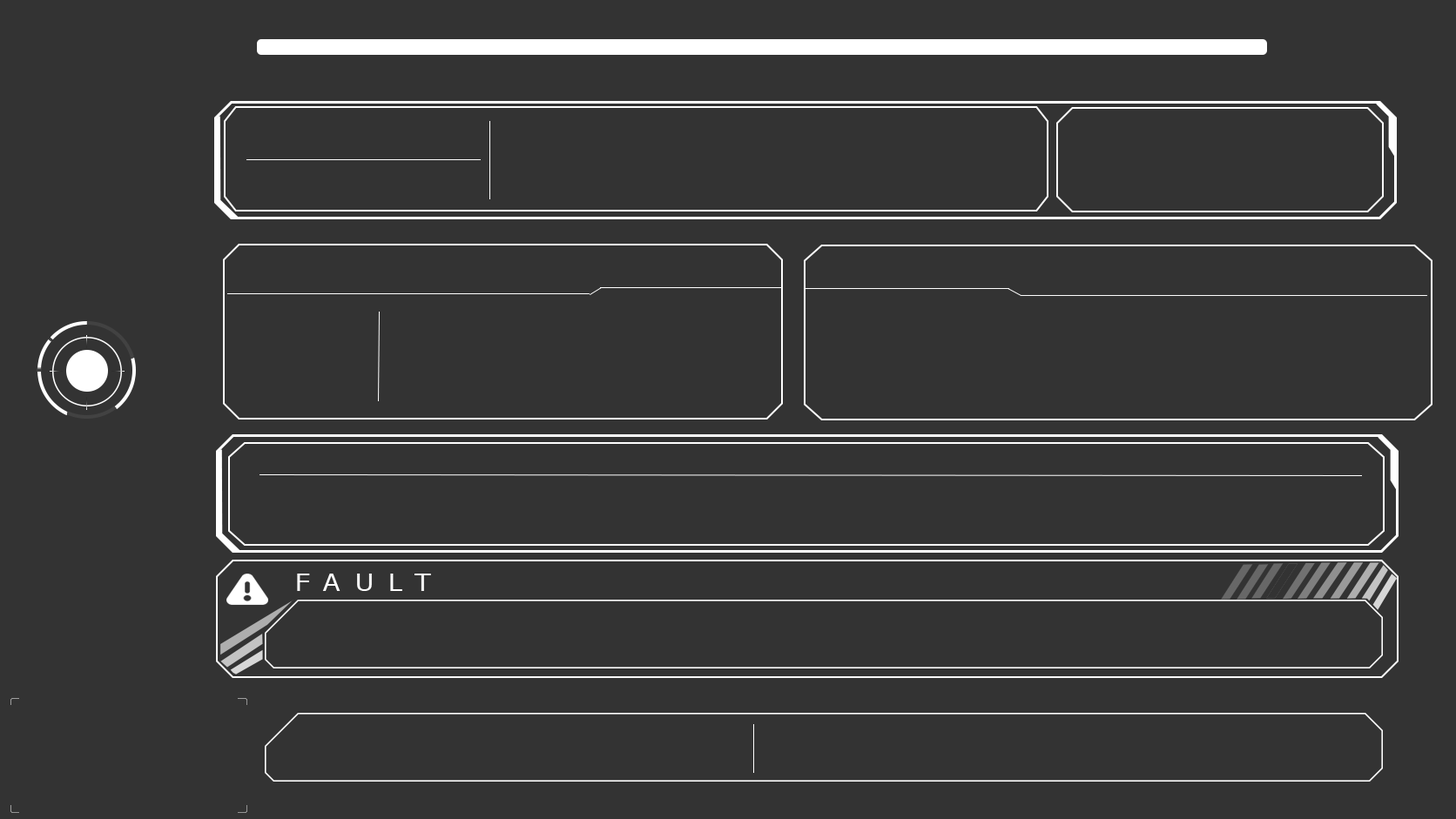
<style>
.page{position:relative;width:1456px;height:819px;background:#333333}
.page>*{position:absolute;margin:0}
.t1{font:23.4px "Tahoma";letter-spacing:0.52em;color:#ffffff;scale:1.21 1}
</style>
<div class="page">
<p class="t1" style="left:297px;top:574px;width:134px;height:17px">FAULT</p>
</div>
